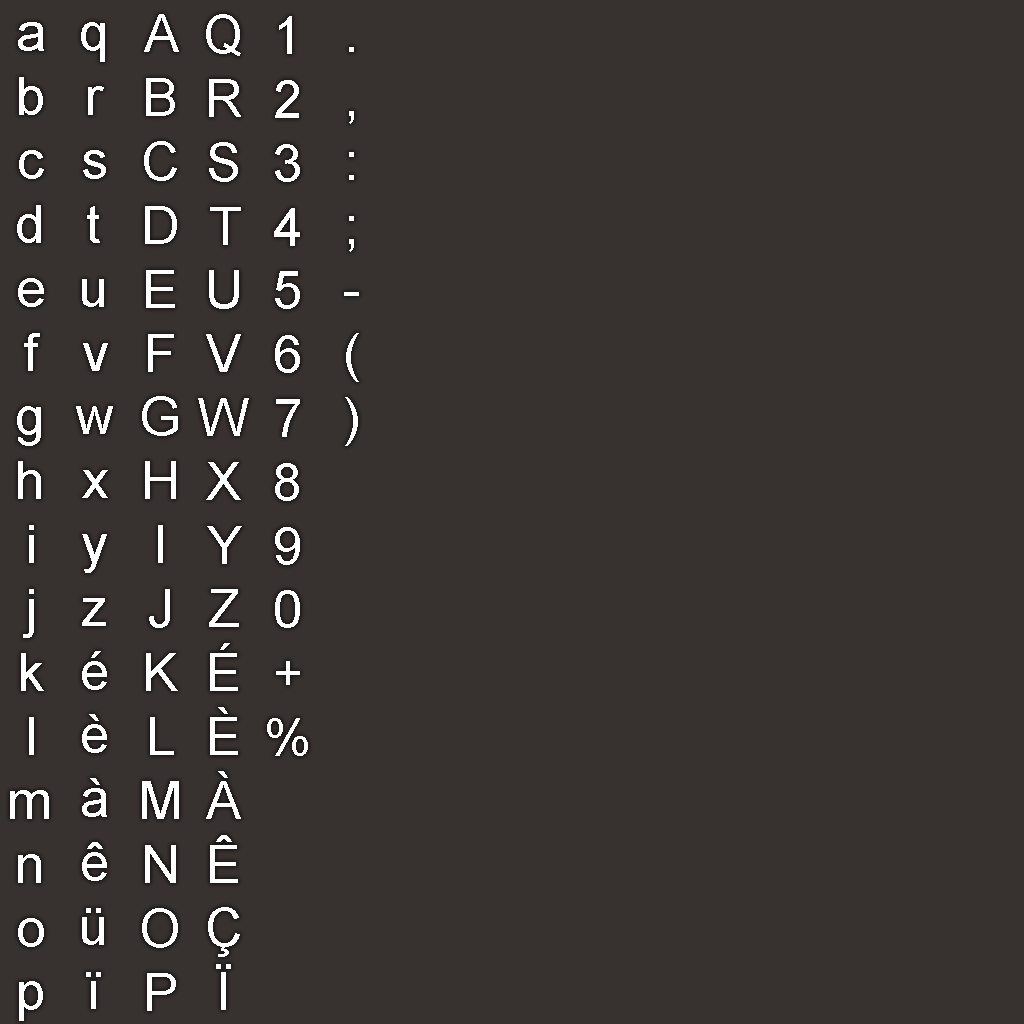
<style>
.page{position:relative;width:1024px;height:1024px;background:#37312f}
.page>*{position:absolute;margin:0}
.t1{font:53.3px "ArialMT";color:#ffffff}
.t2{font:53.2px "ArialMT";color:#ffffff}
</style>
<div class="page">
<p class="t1" style="left:142px;top:14px;width:37px;height:997px;text-align:center">A<br>B<br>C<br>D<br>E<br>F<br>G<br>H<br>I<br>J<br>K<br>L<br>M<br>N<br>O<br>P</p>
<p class="t2" style="left:198px;top:14px;width:51px;height:996px;text-align:center">Q<br>R<br>S<br>T<br>U<br>V<br>W<br>X<br>Y<br>Z<br>É<br>È<br>À<br>Ê<br>Ç<br>Ï</p>
<p class="t2" style="left:267px;top:16px;width:41px;height:740px;text-align:center">1<br>2<br>3<br>4<br>5<br>6<br>7<br>8<br>9<br>0<br>+<br>%</p>
<p class="t1" style="left:10px;top:22px;width:39px;height:999px;text-align:center">a<br>b<br>c<br>d<br>e<br>f<br>g<br>h<br>i<br>j<br>k<br>l<br>m<br>n<br>o<br>p</p>
<p class="t2" style="left:76px;top:22px;width:37px;height:987px;text-align:center">q<br>r<br>s<br>t<br>u<br>v<br>w<br>x<br>y<br>z<br>é<br>è<br>à<br>ê<br>ü<br>ï</p>
<p class="t2" style="left:344px;top:47px;width:15px;height:399px;text-align:center">.<br>,<br>:<br>;<br>-<br>(<br>)</p>
</div>
